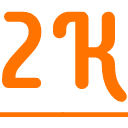
<style>
.page{position:relative;width:128px;height:128px;background:#ffffff}
.page>*{position:absolute;margin:0}
.t1{font:115px "Supermercado-Regular";color:#ff7400}
</style>
<div class="page">
<p class="t1" style="left:2px;top:11px;width:125px;height:91px">2K</p>
</div>
